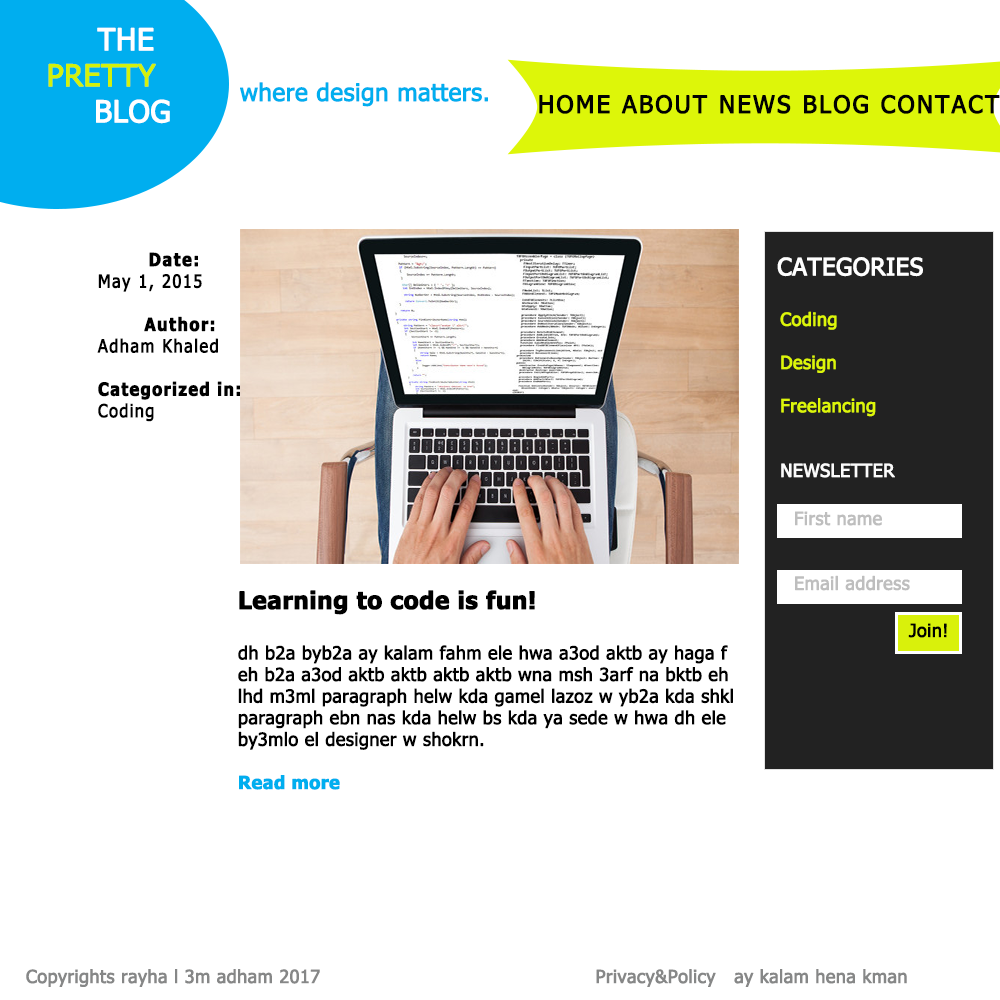
<style>
.page{position:relative;width:1000px;height:1000px;background:#ffffff}
.page>*{position:absolute;margin:0}
.t1{font:30px "Tahoma";color:#d3f10b;font-weight:bold}
.t2{font:30px "Tahoma";color:#ffffff;font-weight:bold}
.t3{font:24px "Tahoma";color:#00aeef;font-weight:bold}
.t4{font:24px "Tahoma";letter-spacing:0.07em;color:#010101;font-weight:bold}
.t5{font:18px "Tahoma-Bold";letter-spacing:0.06em;color:#000000;font-weight:bold;scale:0.9 1}
.t6{font:18px "Tahoma-Bold";letter-spacing:0.07em;color:#000000;font-weight:bold;scale:0.9 1}
.t7{font:18px "Tahoma";letter-spacing:0.07em;color:#000000;font-weight:bold;scale:0.9 1}
.t8{font:18px "Tahoma";letter-spacing:0.06em;color:#000000;font-weight:bold;scale:0.9 1}
.t9{font:18px "Tahoma";color:#ddf609;font-weight:bold}
.t10{font:24px "Tahoma-Bold";color:#ffffff;font-weight:bold}
.t11{font:24px "Tahoma";color:#ffffff;font-weight:bold}
.t12{font:18px "Tahoma";color:#fbfbfb;font-weight:bold}
.t13{font:18px "Tahoma";color:#000000;font-weight:bold}
.t14{font:24px "Tahoma-Bold";color:#000000;font-weight:bold}
.t15{font:18px "Tahoma-Bold";color:#00aeef;font-weight:bold}
.t16{font:18px "Tahoma";color:#868787;font-weight:bold}
</style>
<div class="page">
<p class="t1" style="left:48px;top:27px;width:122px;height:97px"><span class="t2">THE<br>   </span> PRETTY<br><span class="t2">            BLOG</span></p>
<p class="t3" style="left:240px;top:82px;width:248px;height:25px">where design matters.</p>
<p class="t4" style="left:539px;top:94px;width:461px;height:20px">HOME ABOUT NEWS BLOG CONTACT</p>
<p class="t5" style="left:97px;top:252px;width:143px;height:170px"><span class="t6">        Date:<br></span><span class="t7">May 1, 2015<br><br>       </span><span class="t6">Author:<br></span><span class="t7">Adham Khaled<br><br></span>Categorized in:<br><span class="t8">Coding</span></p>
<p class="t9" style="left:777px;top:257px;width:146px;height:221px"><span class="t10"><br>  </span><span class="t11">CATEGORIES<br><br></span>   Coding<br><br>   Design<br><br>   Freelancing<br><br><br>   <span class="t12">NEWSLETTER</span></p>
<p class="t13" style="left:238px;top:590px;width:495px;height:200px"><span class="t14">Learning to code is fun!<br><br></span>dh b2a byb2a ay kalam fahm ele hwa a3od aktb ay haga f<br>eh b2a a3od aktb aktb aktb aktb wna msh 3arf na bktb eh<br>lhd m3ml paragraph helw kda gamel lazoz w yb2a kda shkl<br>paragraph ebn nas kda helw bs kda ya sede w hwa dh ele <br>by3mlo el designer w shokrn.<br><br><span class="t15">Read more</span></p>
<p class="t13" style="left:908px;top:623px;width:39px;height:15px">Join!</p>
<p class="t16" style="left:26px;top:969px;width:881px;height:18px">Copyrights rayha l 3m adham 2017                                             Privacy&amp;Policy   ay kalam hena kman</p>
</div>
